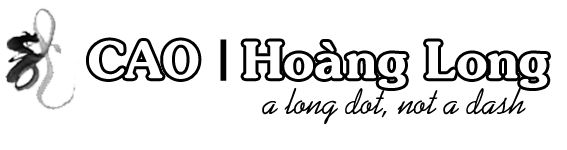
<style>
.page{position:relative;width:567px;height:150px;background:#ffffff}
.page>*{position:absolute;margin:0}
.t1{font:50px "VNI-Souvir-Bold";color:#ffffff}
.t2{font:54.1px "VNI-Souvir-Bold";color:#000000;scale:1.42 1}
.t3{font:36px "VNkoala";color:#000000}
</style>
<div class="page">
<p class="t1" style="left:89px;top:40px;width:110px;height:39px">CAO</p>
<p class="t2" style="left:220px;top:39px;width:7px;height:42px">|</p>
<p class="t1" style="left:243px;top:41px;width:305px;height:47px">Hoaøng Long</p>
<p class="t3" style="left:262px;top:87px;width:264px;height:38px">a long dot, not a dash</p>
</div>
